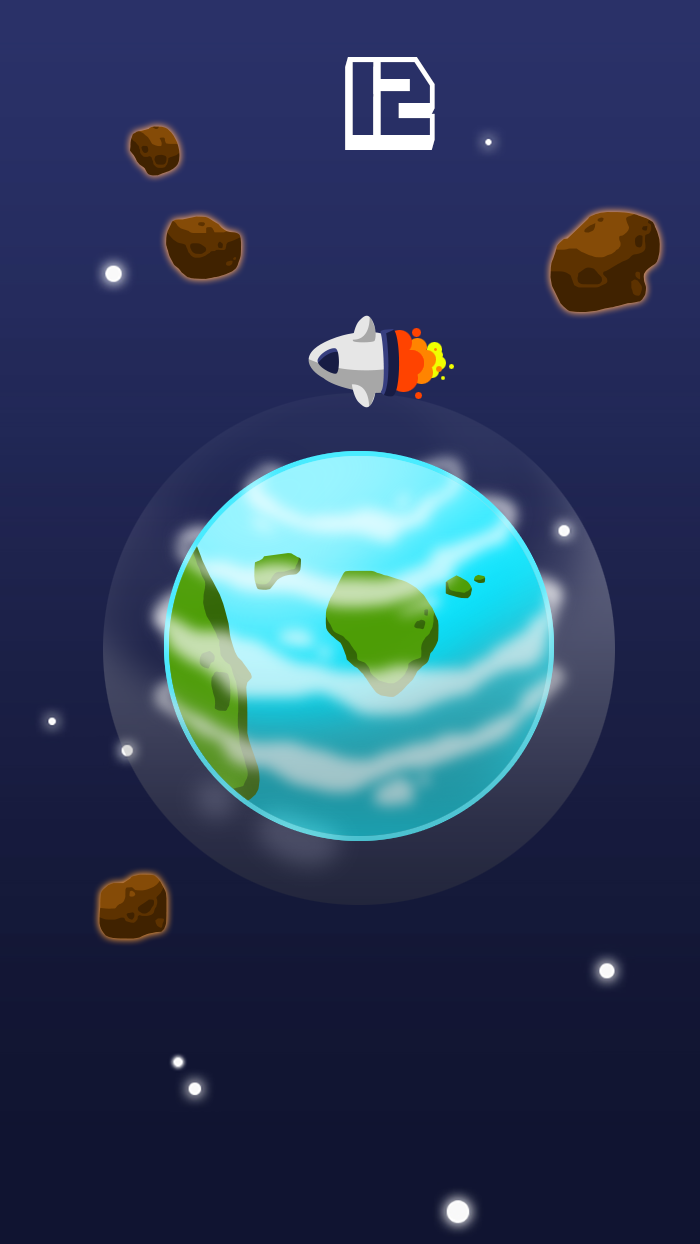
<style>
.page{position:relative;width:700px;height:1244px}
.page>*{position:absolute;margin:0}
.t1{font:105.1px "DimitriSwank";color:#ffffff}
</style>
<div class="page">
<p class="t1" style="left:345px;top:57px;width:90px;height:93px">12</p>
</div>
